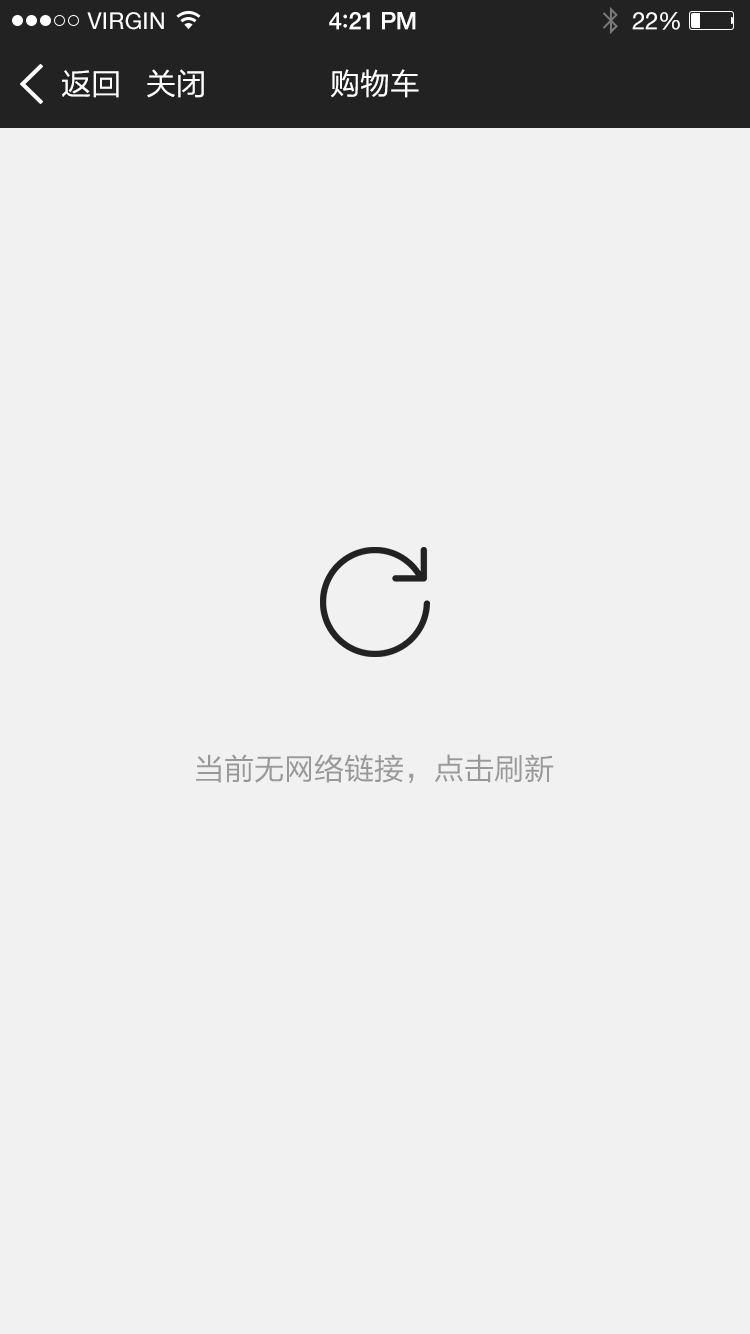
<style>
.page{position:relative;width:750px;height:1334px;background:#f1f1f1}
.page>*{position:absolute;margin:0}
.t1{font:23px "HelveticaNeue";letter-spacing:0.02em;color:#ffffff}
.t2{font:24px "HelveticaNeue-Medium";letter-spacing:-0.02em;color:#ffffff}
.t3{font:26px "Avenir-Medium";letter-spacing:-0.02em;color:#ffffff}
.t4{font:24px "HelveticaNeue";letter-spacing:-0.02em;color:#ffffff}
.t5{font:30px "FZLTHK--GBK1-0";color:#ffffff}
.t6{font:30px "FZLTHK--GBK1-0";color:#999999}
</style>
<div class="page">
<p class="t1" style="left:87px;top:12px;width:77px;height:18px">VIRGIN</p>
<p class="t2" style="left:329px;top:12px;width:87px;height:18px">4<span class="t3">:</span>21 PM</p>
<p class="t4" style="left:632px;top:12px;width:48px;height:18px">22%</p>
<p class="t5" style="left:62px;top:70px;width:57px;height:28px">返回</p>
<p class="t5" style="left:147px;top:69px;width:57px;height:29px">关闭</p>
<p class="t5" style="left:331px;top:69px;width:88px;height:29px">购物车</p>
<p class="t6" style="left:196px;top:754px;width:358px;height:30px">当前无网络链接，点击刷新</p>
</div>
